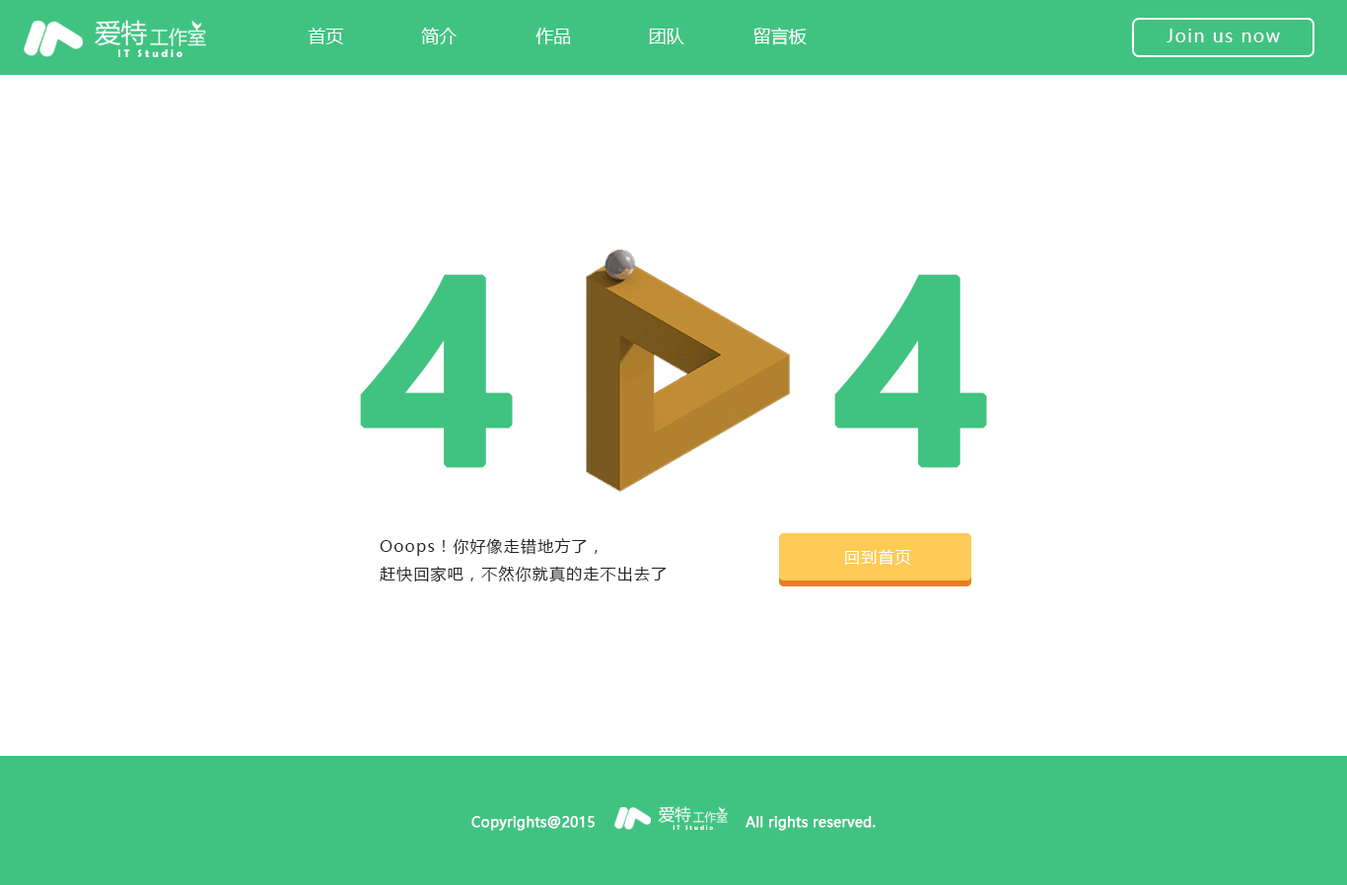
<style>
.page{position:relative;width:1347px;height:885px;background:#ffffff}
.page>*{position:absolute;margin:0}
.t1{font:17.7px "MicrosoftYaHei";color:#ffffff}
.t2{font:17.7px "MicrosoftYaHei";letter-spacing:0.075em;color:#fff4ff}
.t3{font:11px "BerlinSansFBDemi-Bold";color:#ffffff}
.t4{font:246.5px "MicrosoftYaHei-Bold";letter-spacing:0.075em;color:#40c381;font-weight:bold}
.t5{font:15.8px "MicrosoftYaHei";letter-spacing:0.075em;color:#232323}
.t6{font:15.8px "MicrosoftYaHei";letter-spacing:0.075em;color:#ffffff}
.t7{font:13.8px "MicrosoftYaHei";color:#ffffff;font-weight:bold}
.t8{font:7px "BerlinSansFBDemi-Bold";color:#ffffff}
</style>
<div class="page">
<p class="t1" style="left:308px;top:28px;width:35px;height:16px">首页</p>
<p class="t1" style="left:421px;top:28px;width:35px;height:16px">简介</p>
<p class="t1" style="left:535px;top:28px;width:36px;height:16px">作品</p>
<p class="t1" style="left:649px;top:28px;width:35px;height:16px">团队</p>
<p class="t1" style="left:753px;top:28px;width:54px;height:17px">留言板</p>
<p class="t2" style="left:1166px;top:29px;width:114px;height:13px">Join us now</p>
<p class="t3" style="left:118px;top:49px;width:64px;height:8px">I T   S t u d i o</p>
<p class="t4" style="left:360px;top:274px;width:153px;height:194px">4</p>
<p class="t4" style="left:834px;top:274px;width:153px;height:194px">4</p>
<p class="t5" style="left:380px;top:538px;width:286px;height:45px">Ooops！你好像走错地方了，<br>赶快回家吧，不然你就真的走不出去了</p>
<p class="t6" style="left:845px;top:549px;width:66px;height:17px">回到首页</p>
<p class="t7" style="left:471px;top:816px;width:124px;height:15px">Copyrights@2015</p>
<p class="t7" style="left:745px;top:816px;width:131px;height:15px">All rights reserved.</p>
<p class="t8" style="left:672px;top:825px;width:41px;height:5px">I T   S t u d i o</p>
</div>
